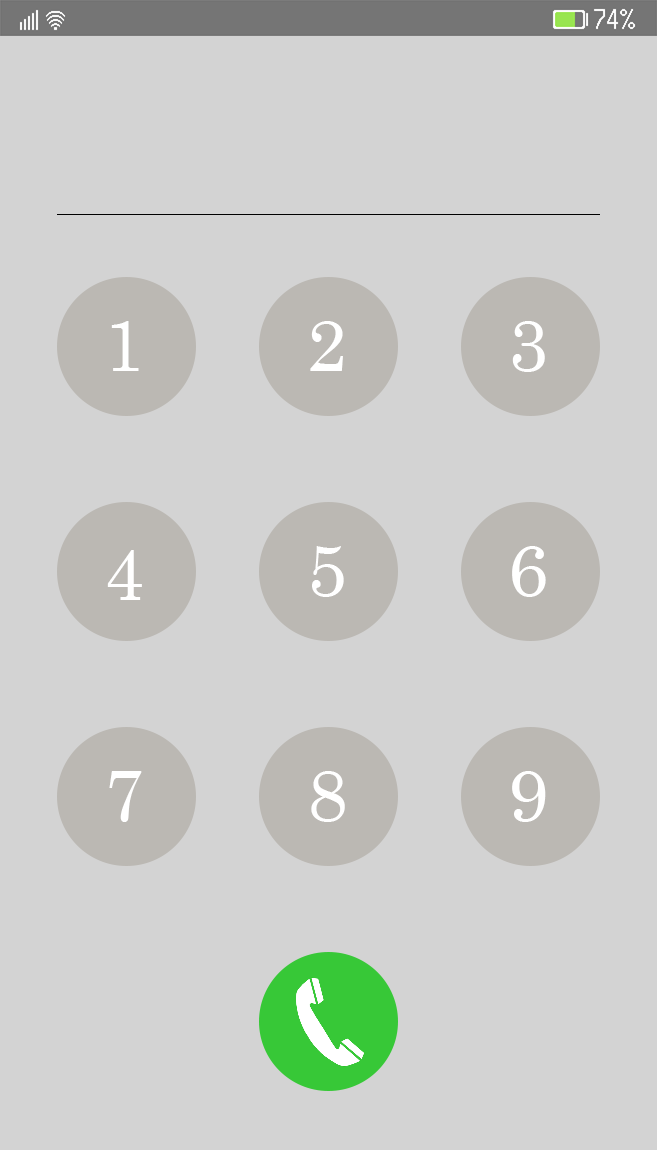
<style>
.page{position:relative;width:657px;height:1150px;background:#d3d3d3}
.page>*{position:absolute;margin:0}
.t1{font:72px "Century";color:#ffffff}
</style>
<div class="page">
<p class="t1" style="left:111px;top:321px;width:28px;height:50px">1</p>
<p class="t1" style="left:310px;top:321px;width:33px;height:50px">2</p>
<p class="t1" style="left:512px;top:321px;width:33px;height:51px">3</p>
<p class="t1" style="left:107px;top:550px;width:35px;height:50px">4</p>
<p class="t1" style="left:312px;top:546px;width:32px;height:51px">5</p>
<p class="t1" style="left:512px;top:546px;width:34px;height:51px">6</p>
<p class="t1" style="left:109px;top:771px;width:33px;height:51px">7</p>
<p class="t1" style="left:311px;top:771px;width:34px;height:51px">8</p>
<p class="t1" style="left:512px;top:771px;width:34px;height:51px">9</p>
</div>
